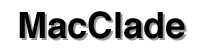
<style>
.page{position:relative;width:208px;height:49px;background:#ffffff}
.page>*{position:absolute;margin:0}
.t1{font:36px "Helvetica-Bold";color:#000000}
.t2{font:36px "Helvetica-Bold"}
</style>
<div class="page">
<p class="t1" style="left:19px;top:11px;width:166px;height:28px">MacClade</p>
<p class="t2" style="left:21px;top:13px;width:166px;height:28px">MacClade</p>
</div>
